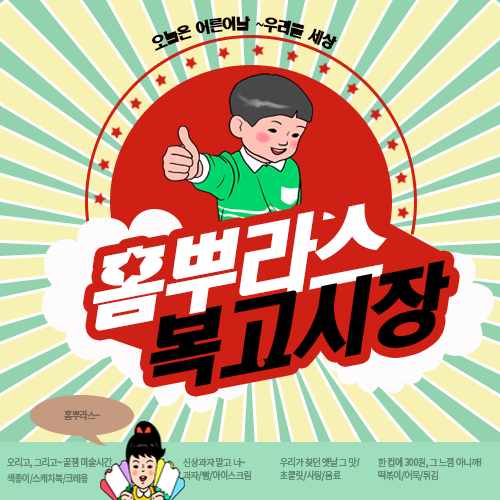
<style>
.page{position:relative;width:500px;height:500px;background:#f7f1b3}
.page>*{position:absolute;margin:0}
.t1{font:15px/95px "HeadlineR-HM";letter-spacing:-0.08em;color:#0f0100;scale:0.9 1}
.t2{font:84.6px/76.5px "HeadlineR-HM";letter-spacing:-0.08em;color:#ffffff;scale:0.97 1}
.t3{font:84.6px/76.5px "HeadlineR-HM";letter-spacing:-0.08em;color:#000000;scale:0.97 1}
.t4{font:10px "NotoSansKR-Regular";letter-spacing:-0.08em;color:#7c6050;font-weight:bold;scale:0.9 1}
.t5{font:10px/8px "NotoSansKR-Regular";letter-spacing:-0.08em;color:#638d77;font-weight:bold;scale:0.9 1}
.t6{font:10px/8px "NotoSansKR-Bold";letter-spacing:-0.08em;color:#638d77;scale:0.9 1}
.t7{font:10px/13px "NotoSansKR-Regular";letter-spacing:-0.08em;color:#638d77;font-weight:bold;scale:0.9 1}
.t8{font:10px/13px "NotoSansKR-Regular";letter-spacing:-0.08em;color:#638d77;font-weight:bold;font-style:italic;scale:0.9 1}
</style>
<div class="page">
<p class="t1" style="left:151px;top:16px;width:186px;height:35px">오늘은 어른이날 ~우리들 세상</p>
<p class="t2" style="left:93px;top:203px;width:357px;height:184px;rotate:-11deg">홈뿌라스<br><span class="t3">  복고시장</span></p>
<p class="t4" style="left:64px;top:410px;width:36px;height:11px">홈뿌라스~</p>
<p class="t5" style="left:7px;top:457px;width:106px;height:27px">오리고, 그리고~ 꿀잼 미술시간<br><br><span class="t6">색종이/스케치북/크레용</span></p>
<p class="t7" style="left:183px;top:457px;width:68px;height:24px">신상과자 말고 너~<br>과자/빵/아이스크림</p>
<p class="t7" style="left:280px;top:457px;width:80px;height:24px">우리가 찾던 옛날 그 맛<span class="t8">!<br></span>초콜릿/사탕/음료</p>
<p class="t7" style="left:378px;top:457px;width:104px;height:24px">한 컵에 300원, 그 느낌 아니까!<br>떡볶이/어묵/튀김</p>
</div>
